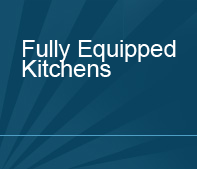
<style>
.page{position:relative;width:197px;height:169px;background:#0a4360}
.page>*{position:absolute;margin:0}
.t1{font:24px/20px "ArialMT";letter-spacing:-0.01em;color:#ffffff}
</style>
<div class="page">
<p class="t1" style="left:22px;top:40px;width:154px;height:37px">Fully Equipped<br>Kitchens</p>
</div>
